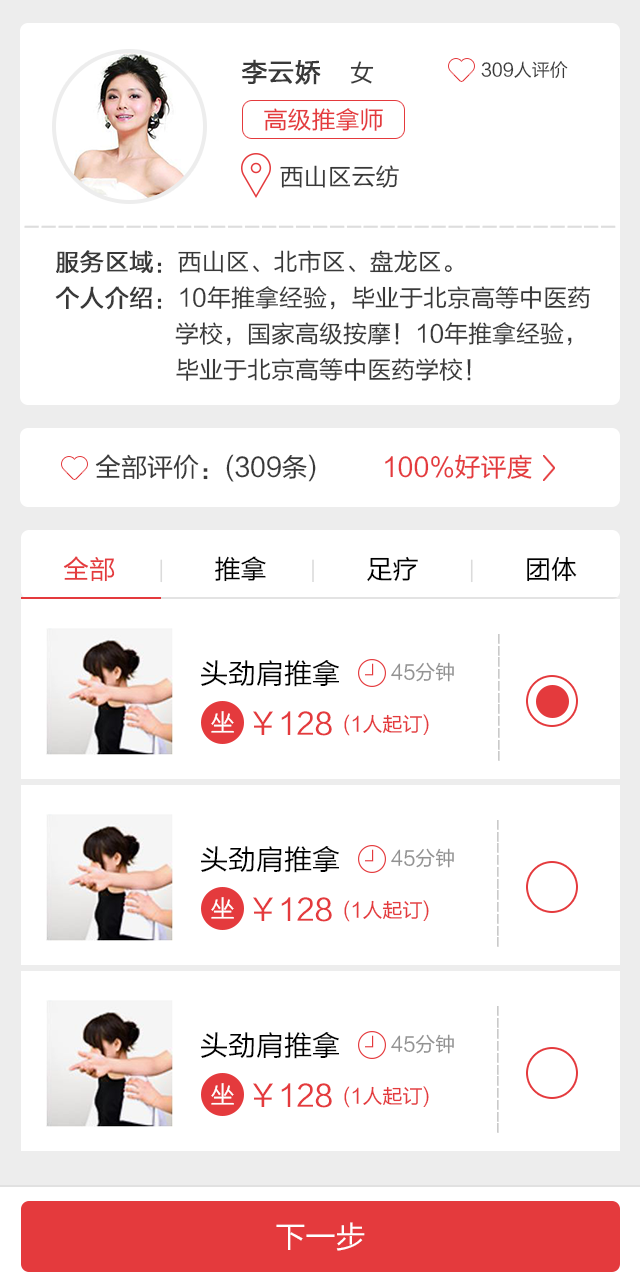
<style>
.page{position:relative;width:640px;height:1285px;background:#ffffff}
.page>*{position:absolute;margin:0}
.t1{font:26px "FZLTHJW--GB1-0";color:#393939;font-weight:bold}
.t2{font:24px "FZLTHJW--GB1-0";color:#393939}
.t3{font:18px "FZLTHJW--GB1-0";color:#393939}
.t4{font:24px "FZLTHJW--GB1-0";color:#e43a3d}
.t5{font:26px "FZLTHJW--GB1-0";color:#dddddd}
.t6{font:24px/30px "FZLTHJW--GB1-0";color:#393939}
.t7{font:24px/36px "FZLTHJW--GB1-0";color:#393939;font-weight:bold}
.t8{font:24px/36px "FZLTHJW--GB1-0";color:#393939}
.t9{font:26px "FZLTHJW--GB1-0";color:#393939}
.t10{font:26px "FZLTHJW--GB1-0";color:#e43a3d}
.t11{font:22px "FZLTHJW--GB1-0";color:#dbdbdb}
.t12{font:26px "FZLTHJW--GB1-0";color:#000000}
.t13{font:18px/50px "FZLTHJW--GB1-0";color:#bcbcbc}
.t14{font:28px "FZLTHJW--GB1-0";color:#000000}
.t15{font:20px "FZLTHJW--GB1-0";color:#929292}
.t16{font:24px "FZLTHJW--GB1-0";color:#ffffff}
.t17{font:30px "FZLTHJW--GB1-0";color:#e43a3d}
.t18{font:20px "FZLTHJW--GB1-0";color:#e43a3d}
.t19{font:30px "FZLTHJW--GB1-0";color:#ffffff}
</style>
<div class="page">
<p class="t1" style="left:242px;top:59px;width:132px;height:26px">李云娇    <span class="t2">女</span></p>
<p class="t3" style="left:481px;top:61px;width:87px;height:18px">309人评价</p>
<p class="t4" style="left:264px;top:108px;width:119px;height:23px">高级推拿师</p>
<p class="t2" style="left:280px;top:165px;width:119px;height:23px">西山区云纺</p>
<p class="t5" style="left:24px;top:225px;width:592px;height:3px">-----------------------------------</p>
<p class="t6" style="left:55px;top:250px;width:536px;height:131px"><span class="t7">服务区域</span><span class="t8">：西山区、北市区、盘龙区。<br></span><span class="t7">个人介绍</span><span class="t8">：10年推拿经验，</span>毕业于北京高等中医药<br>                  学校，国家高级按摩！<span class="t8">10年推拿经验，<br></span>                  毕业于北京高等中医药学校！</p>
<p class="t9" style="left:95px;top:454px;width:437px;height:28px">全部评价：(309条)         <span class="t10">100%好评度</span></p>
<p class="t10" style="left:63px;top:556px;width:514px;height:27px">全部      <span class="t11">|       </span><span class="t12">推拿      </span><span class="t11">|       </span><span class="t12">足疗       </span><span class="t11">|       </span><span class="t12">团体</span></p>
<p class="t13" style="left:498px;top:634px;width:2px;height:127px">-----------</p>
<p class="t14" style="left:201px;top:660px;width:138px;height:27px">头劲肩推拿</p>
<p class="t15" style="left:391px;top:662px;width:63px;height:20px">45分钟</p>
<p class="t16" style="left:211px;top:711px;width:23px;height:22px">坐</p>
<p class="t17" style="left:253px;top:711px;width:79px;height:25px">￥128</p>
<p class="t18" style="left:344px;top:714px;width:85px;height:22px">(1人起订)</p>
<p class="t13" style="left:497px;top:820px;width:2px;height:127px">-----------</p>
<p class="t14" style="left:201px;top:846px;width:138px;height:27px">头劲肩推拿</p>
<p class="t15" style="left:391px;top:848px;width:63px;height:20px">45分钟</p>
<p class="t16" style="left:211px;top:897px;width:23px;height:22px">坐</p>
<p class="t17" style="left:253px;top:897px;width:79px;height:25px">￥128</p>
<p class="t18" style="left:344px;top:900px;width:85px;height:22px">(1人起订)</p>
<p class="t13" style="left:497px;top:1006px;width:2px;height:127px">-----------</p>
<p class="t14" style="left:201px;top:1032px;width:138px;height:27px">头劲肩推拿</p>
<p class="t15" style="left:391px;top:1034px;width:63px;height:20px">45分钟</p>
<p class="t16" style="left:211px;top:1083px;width:23px;height:22px">坐</p>
<p class="t17" style="left:253px;top:1083px;width:79px;height:25px">￥128</p>
<p class="t18" style="left:344px;top:1086px;width:85px;height:22px">(1人起订)</p>
<p class="t19" style="left:276px;top:1222px;width:89px;height:29px">下一步</p>
</div>
